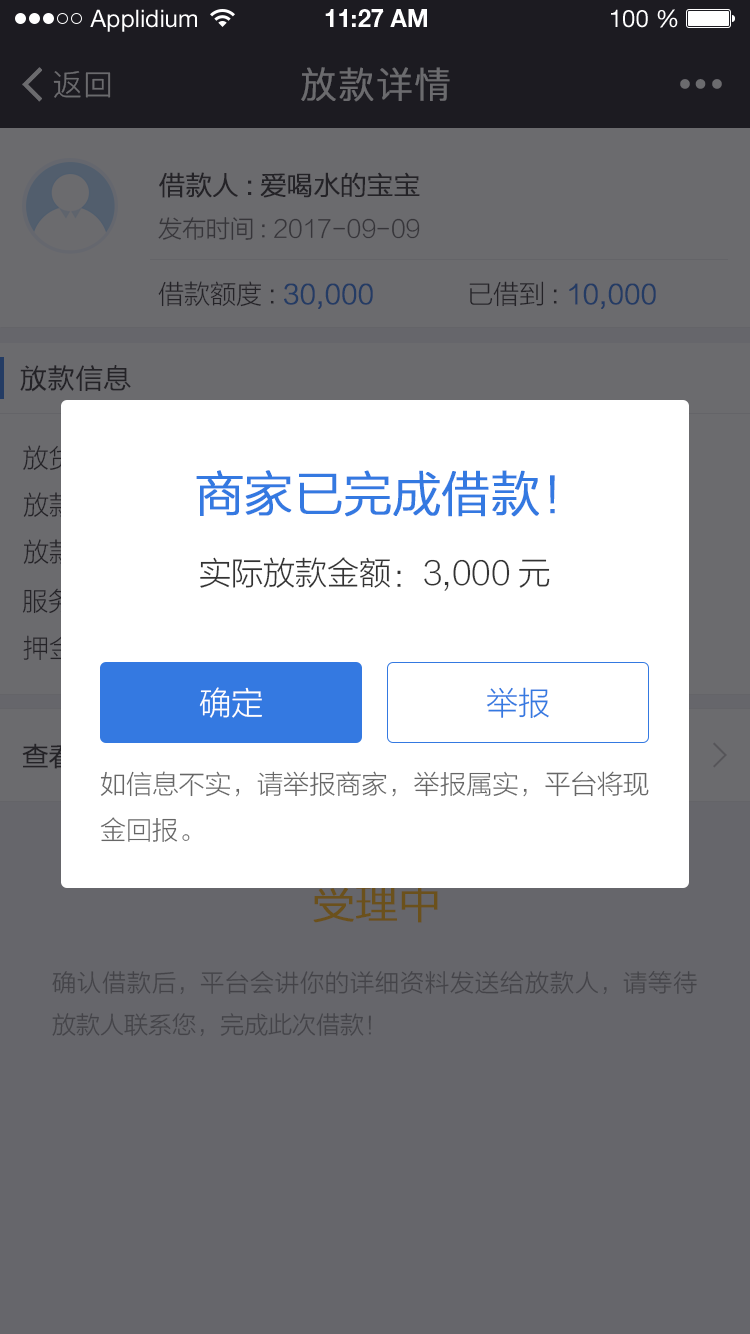
<style>
.page{position:relative;width:750px;height:1334px;background:#66666b}
.page>*{position:absolute;margin:0}
.t1{font:24px "HelveticaNeueLTStd-Roman";color:#ffffff}
.t2{font:24px "HelveticaNeueLTStd-Bd";color:#ffffff}
.t3{font:30px "PingFang-SC-Regular";letter-spacing:0.025em;color:#6b6b6e}
.t4{font:36px "PingFang-SC-Regular";letter-spacing:0.025em;color:#6b6b6e;font-weight:bold}
.t5{font:26px "FZLTXHK--GBK1-0";color:#333333;font-weight:bold}
.t6{font:24px "FZLTXHK--GBK1-0";color:#363539}
.t7{font:26px "FZLTXHK--GBK1-0";font-weight:bold}
.t8{font:26px "FZLTXHK--GBK1-0"}
.t9{font:28px "FZLTH_YS_GBK";color:#333333}
.t10{font:48px "FZLTXHK--GBK1-0";color:#3479e1;font-weight:bold}
.t11{font:32px "FZLTXHK--GBK1-0";color:#333333}
.t12{font:32px "FZLTXHK--GBK1-0";color:#ffffff}
.t13{font:32px "FZLTXHK--GBK1-0";color:#3479e1}
.t14{font:26px "FZLTXHK--GBK1-0";color:#666666}
.t15{font:42px "FZLTXHK--GBK1-0";color:#6b511c;font-weight:bold}
.t16{font:24px "FZLTXHK--GBK1-0";color:#444348}
</style>
<div class="page">
<p class="t1" style="left:90px;top:9px;width:107px;height:23px">Applidium</p>
<p class="t2" style="left:325px;top:9px;width:102px;height:18px">11:27 AM</p>
<p class="t1" style="left:611px;top:9px;width:67px;height:19px">100 %</p>
<p class="t3" style="left:53px;top:71px;width:58px;height:27px">返回</p>
<p class="t4" style="left:301px;top:67px;width:149px;height:35px">放款详情</p>
<p class="t5" style="left:159px;top:172px;width:261px;height:26px">借款人:爱喝水的宝宝</p>
<p class="t6" style="left:158px;top:217px;width:262px;height:23px">发布时间: 2017-09-09</p>
<p class="t7" style="left:158px;top:281px;width:215px;height:28px"><span class="t8">借款额度: </span>30,000</p>
<p class="t7" style="left:469px;top:281px;width:187px;height:28px"><span class="t8">已借到: </span>10,000</p>
<p class="t9" style="left:20px;top:365px;width:111px;height:27px">放款信息</p>
<p class="t10" style="left:196px;top:470px;width:359px;height:47px">商家已完成借款！</p>
<p class="t11" style="left:200px;top:557px;width:350px;height:34px">实际放款金额：3,000元</p>
<p class="t12" style="left:199px;top:687px;width:63px;height:31px">确定</p>
<p class="t13" style="left:486px;top:687px;width:63px;height:32px">举报</p>
<p class="t14" style="left:100px;top:771px;width:549px;height:71px;text-align:justify">如信息不实，请举报商家，举报属实，平台将现金回报。</p>
<p class="t15" style="left:313px;top:882px;width:125px;height:41px">受理中</p>
<p class="t16" style="left:52px;top:970px;width:645px;height:67px;text-align:justify">确认借款后，平台会讲你的详细资料发送给放款人，请等待放款人联系您，完成此次借款！</p>
</div>
